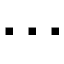
<style>
.page{position:relative;width:64px;height:64px;background:#ffffff}
.page>*{position:absolute;margin:0}
.t1{font:100px "DINOffc-Light";color:#000000}
</style>
<div class="page">
<p class="t1" style="left:5px;top:27px;width:54px;height:8px">…</p>
</div>
